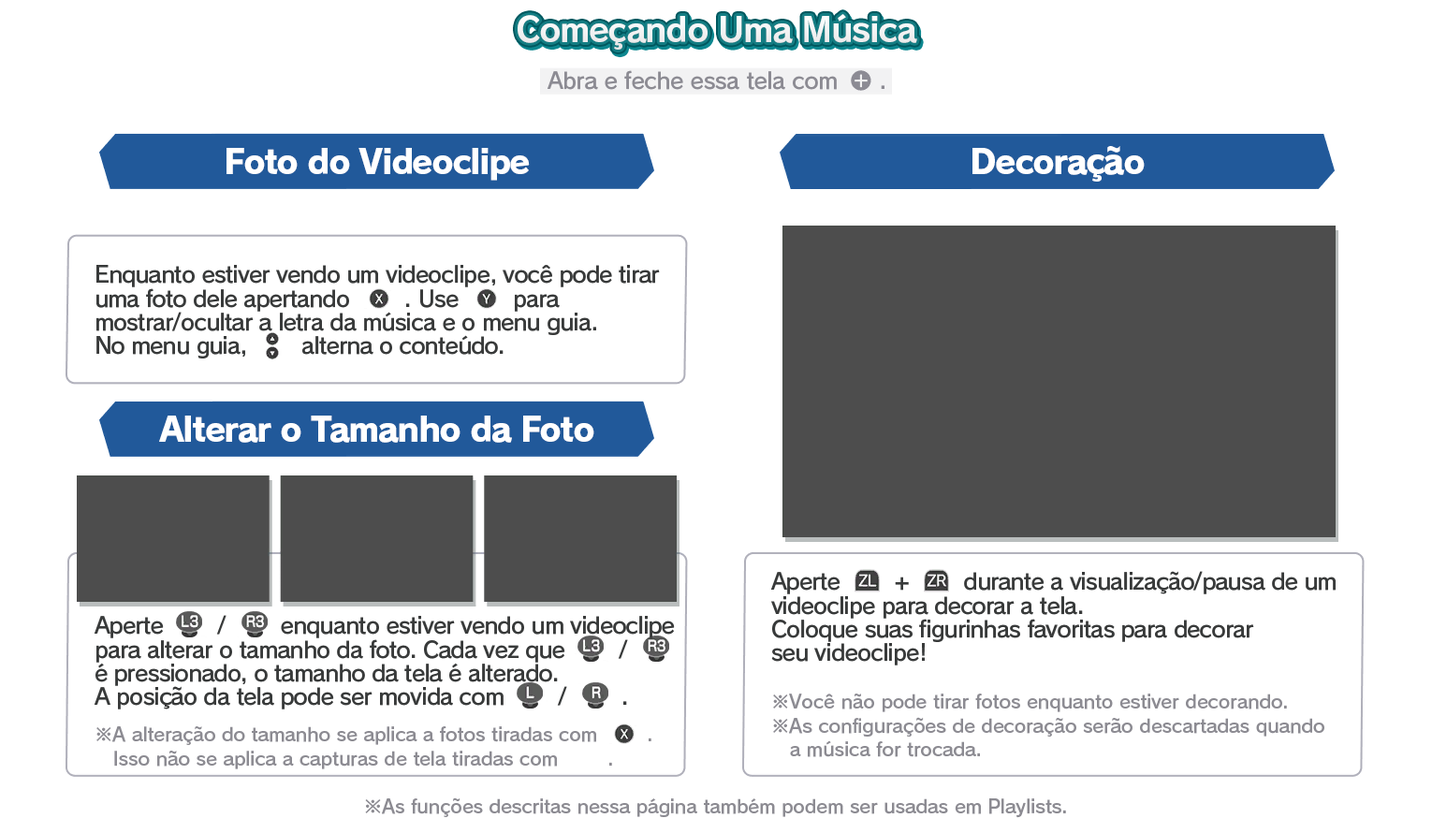
<style>
.page{position:relative;width:1432px;height:833px;background:#ffffff}
.page>*{position:absolute;margin:0}
.t1{font:33.7px "RodinPro-B";letter-spacing:-0.039em;color:#f2f2f3}
.t2{font:22.5px "RodinPro-DB";letter-spacing:-0.025em;color:#8c8b93}
.t3{font:33.7px "RodinPro-EB";letter-spacing:-0.048em;color:#ffffff}
.t4{font:22.5px/23.7px "RodinPro-DB";letter-spacing:-0.04em;color:#383a3a}
.t5{font:18.7px/23.7px "RodinPro-DB";letter-spacing:-0.014em;color:#8c8b92}
.t6{font:18.7px "RodinPro-DB";letter-spacing:-0.014em;color:#8c8b92}
</style>
<div class="page">
<p class="t1" style="left:517px;top:14px;width:400px;height:36px">Começando Uma Música</p>
<p class="t2" style="left:547px;top:70px;width:290px;height:20px">Abra e feche essa tela com</p>
<p class="t2" style="left:881px;top:85px;width:3px;height:4px">.</p>
<p class="t3" style="left:226px;top:148px;width:304px;height:33px">Foto do Videoclipe</p>
<p class="t3" style="left:972px;top:146px;width:172px;height:36px">Decoração</p>
<p class="t4" style="left:96px;top:265px;width:564px;height:93px">Enquanto estiver vendo um videoclipe, você pode tirar<br>uma foto dele apertando        . Use        para<br>mostrar/ocultar a letra da música e o menu guia.<br>No menu guia,        alterna o conteúdo.</p>
<p class="t3" style="left:159px;top:415px;width:435px;height:28px">Alterar o Tamanho da Foto</p>
<p class="t4" style="left:771px;top:571px;width:564px;height:94px">Aperte        +        durante a visualização/pausa de um<br>videoclipe para decorar a tela.<br>Coloque suas figurinhas favoritas para decorar<br>seu videoclipe!</p>
<p class="t4" style="left:95px;top:615px;width:580px;height:94px">Aperte        /        enquanto estiver vendo um videoclipe<br>para alterar o tamanho da foto. Cada vez que        /        <br>é pressionado, o tamanho da tela é alterado.<br>A posição da tela pode ser movida com        /        .</p>
<p class="t5" style="left:773px;top:693px;width:551px;height:64px">※Você não pode tirar fotos enquanto estiver decorando.<br>※As configurações de decoração serão descartadas quando<br>   a música for trocada.</p>
<p class="t5" style="left:96px;top:726px;width:555px;height:43px">※A alteração do tamanho se aplica a fotos tiradas com        .<br>   Isso não se aplica a capturas de tela tiradas com        .</p>
<p class="t6" style="left:365px;top:797px;width:701px;height:21px">※As funções descritas nessa página também podem ser usadas em Playlists.</p>
</div>
